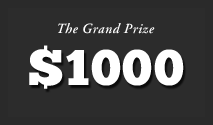
<style>
.page{position:relative;width:213px;height:125px;background:#2c2c2c}
.page>*{position:absolute;margin:0}
.t1{font:14px "AGaramond-SemiboldItalicOsF";letter-spacing:0.025em;color:#ffffff}
.t2{font:50px "ChunkFive-Roman";letter-spacing:0.025em;color:#ffffff}
</style>
<div class="page">
<p class="t1" style="left:58px;top:23px;width:97px;height:11px">The Grand Prize</p>
<p class="t2" style="left:29px;top:45px;width:155px;height:44px">$1000</p>
</div>
